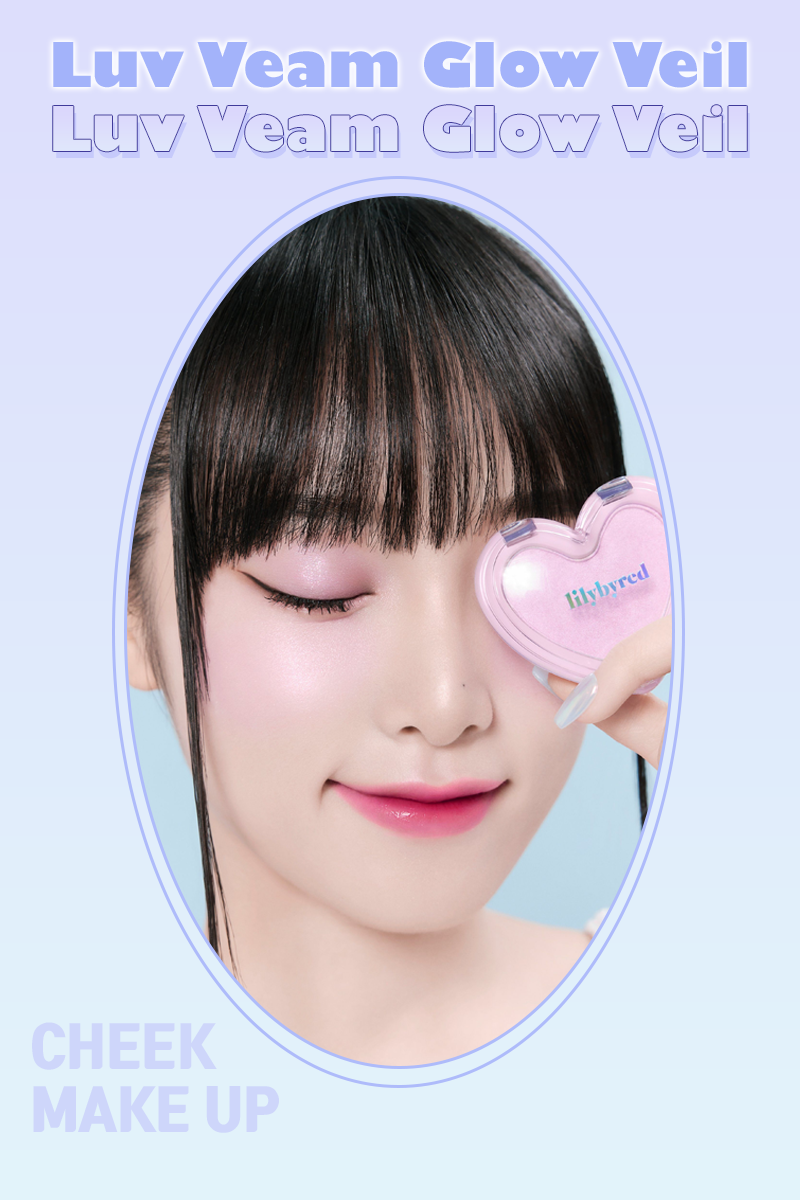
<style>
.page{position:relative;width:800px;height:1200px}
.page>*{position:absolute;margin:0}
.t1{font:60.6px "GillSans-UltraBold";color:#a3b3fa}
.t2{font:53px "TmonMonsoriBlack";color:#ced6fa}
</style>
<div class="page">
<p class="t1" style="left:53px;top:41px;width:694px;height:47px">Luv Veam Glow Veil</p>
<p class="t2" style="left:32px;top:1022px;width:247px;height:111px">CHEEK<br>MAKE UP</p>
</div>
